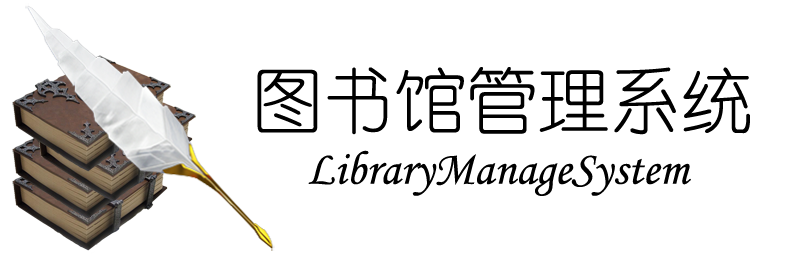
<style>
.page{position:relative;width:796px;height:254px;background:#ffffff}
.page>*{position:absolute;margin:0}
.t1{font:71.4px "YouYuan";color:#000000}
.t2{font:47.6px "MonotypeCorsiva";color:#000000}
</style>
<div class="page">
<p class="t1" style="left:257px;top:67px;width:493px;height:68px">图书馆管理系统</p>
<p class="t2" style="left:308px;top:150px;width:383px;height:46px">LibraryManageSystem</p>
</div>
